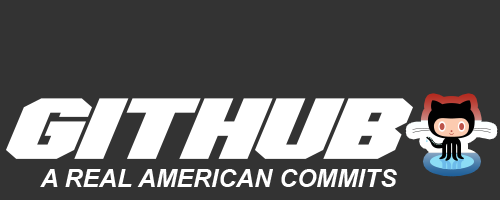
<style>
.page{position:relative;width:500px;height:200px;background:#333333}
.page>*{position:absolute;margin:0}
.t1{font:86px "Hauser-BoldItalic";color:#ffffff;scale:1.56 1}
.t2{font:24.9px "Arial-BoldItalicMT";color:#ffffff}
</style>
<div class="page">
<p class="t1" style="left:6px;top:98px;width:407px;height:61px">GITHUB</p>
<p class="t2" style="left:40px;top:169px;width:357px;height:18px">A REAL AMERICAN COMMITS</p>
</div>
